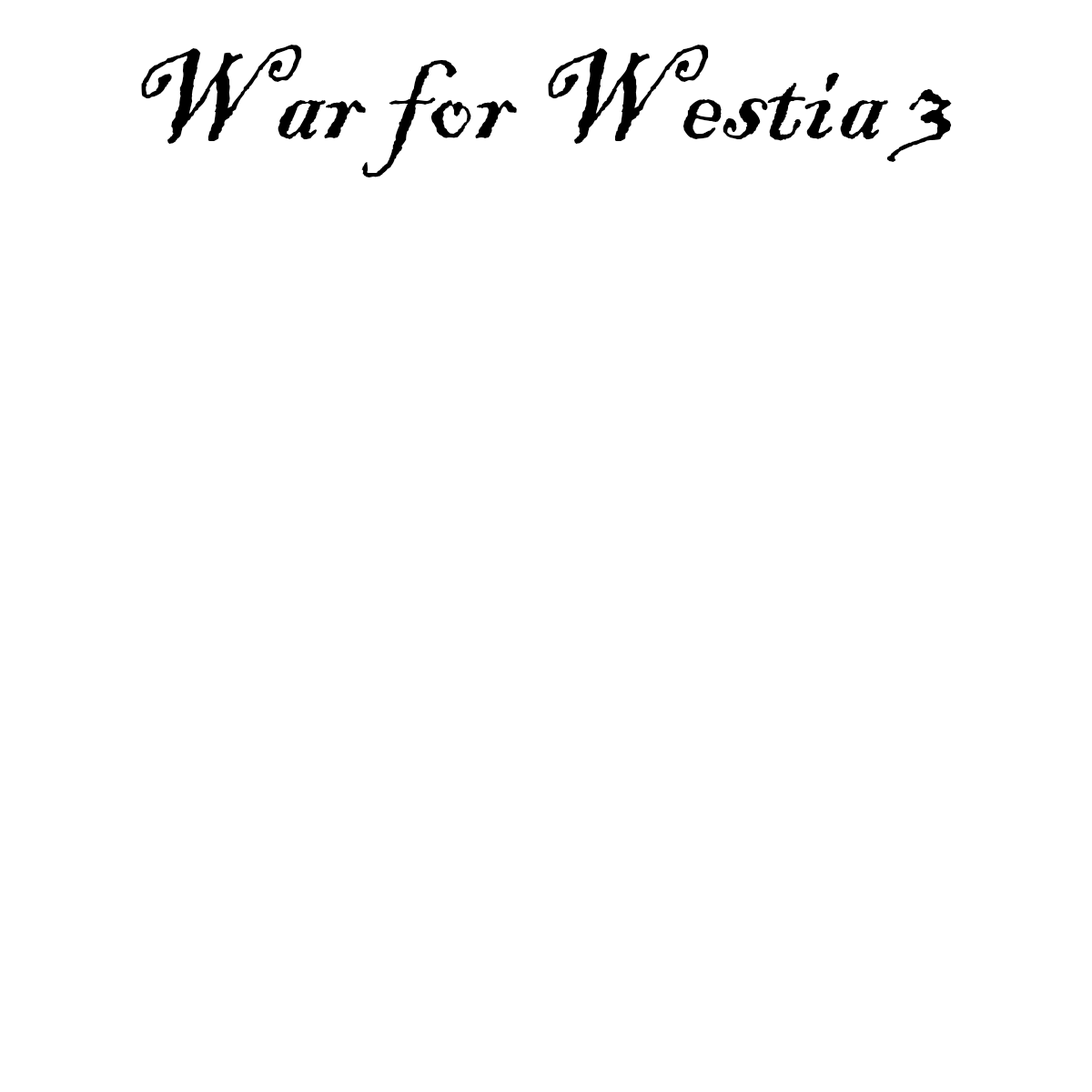
<style>
.page{position:relative;width:1092px;height:1092px;background:#ffffff}
.page>*{position:absolute;margin:0}
.t1{font:136.5px "BlackadderITC-Regular";color:#000000}
</style>
<div class="page">
<p class="t1" style="left:141px;top:45px;width:811px;height:132px">War for Westia 3</p>
</div>
